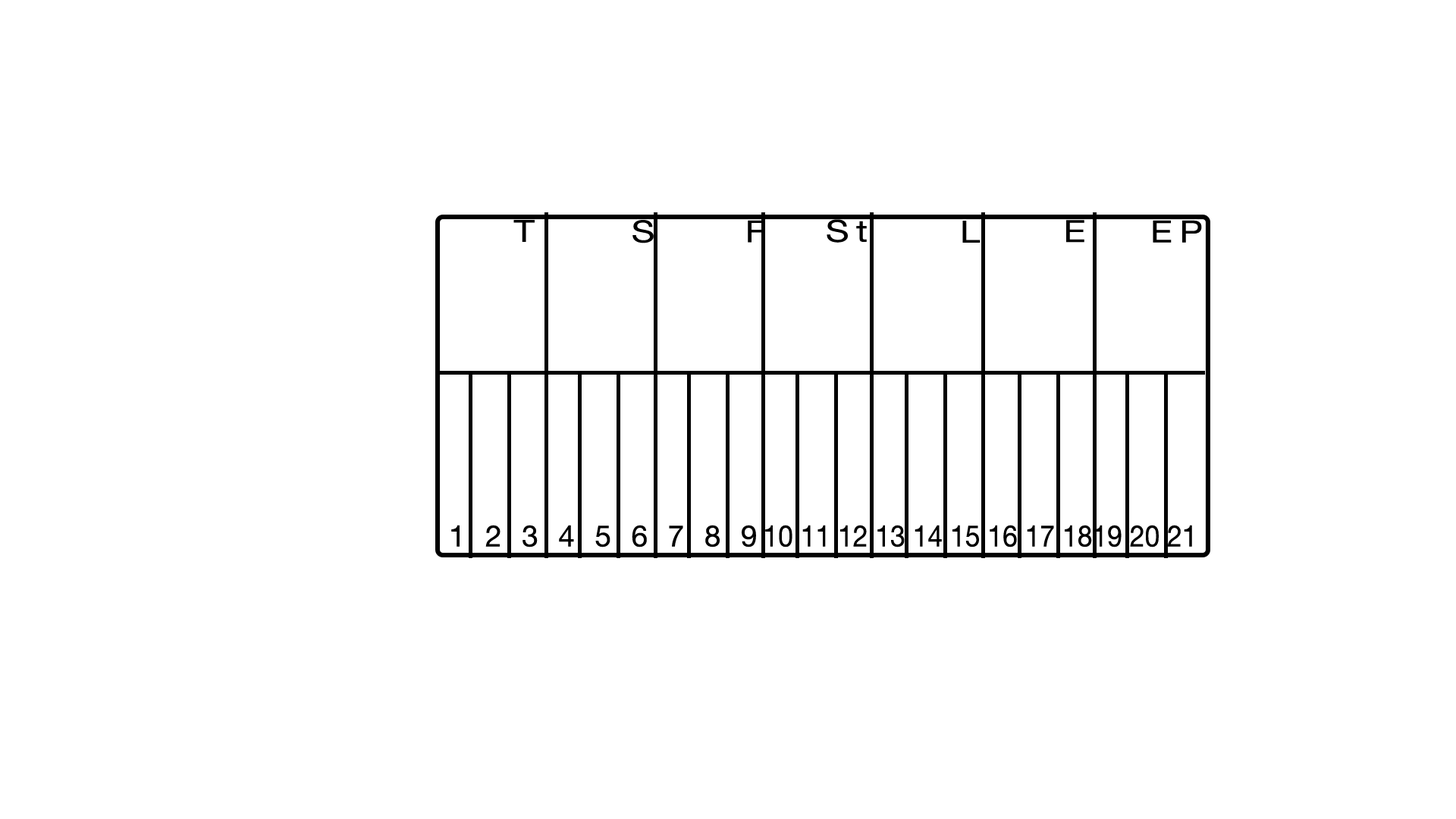
<style>
.page{position:relative;width:1456px;height:819px;background:#ffffff}
.page>*{position:absolute;margin:0}
.t1{font:29.6px "HelveticaNeue";color:#000000;scale:0.91 1}
.t2{font:29.6px "HelveticaNeue";letter-spacing:0.2em;color:#000000}
</style>
<div class="page">
<p class="t1" style="left:451px;top:525px;width:741px;height:23px"><span class="t2">1 2 3 4 5 6 7 8 9</span>10 11 12 13 14 15 16 17 1819 20 21</p>
</div>
